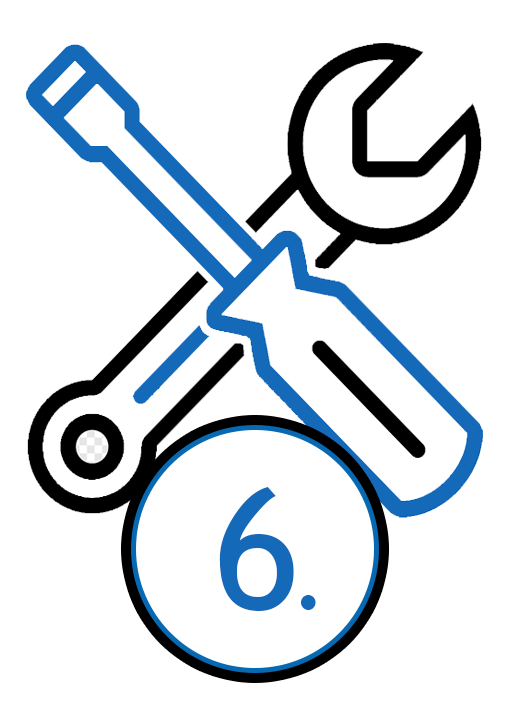
<style>
.page{position:relative;width:510px;height:710px;background:#ffffff}
.page>*{position:absolute;margin:0}
.t1{font:166.7px "TrebuchetMS";color:#1469b9}
.t2{font:100px "TrebuchetMS";color:#1469b9}
</style>
<div class="page">
<p class="t1" style="left:219px;top:487px;width:97px;height:124px">6<span class="t2">.</span></p>
</div>
